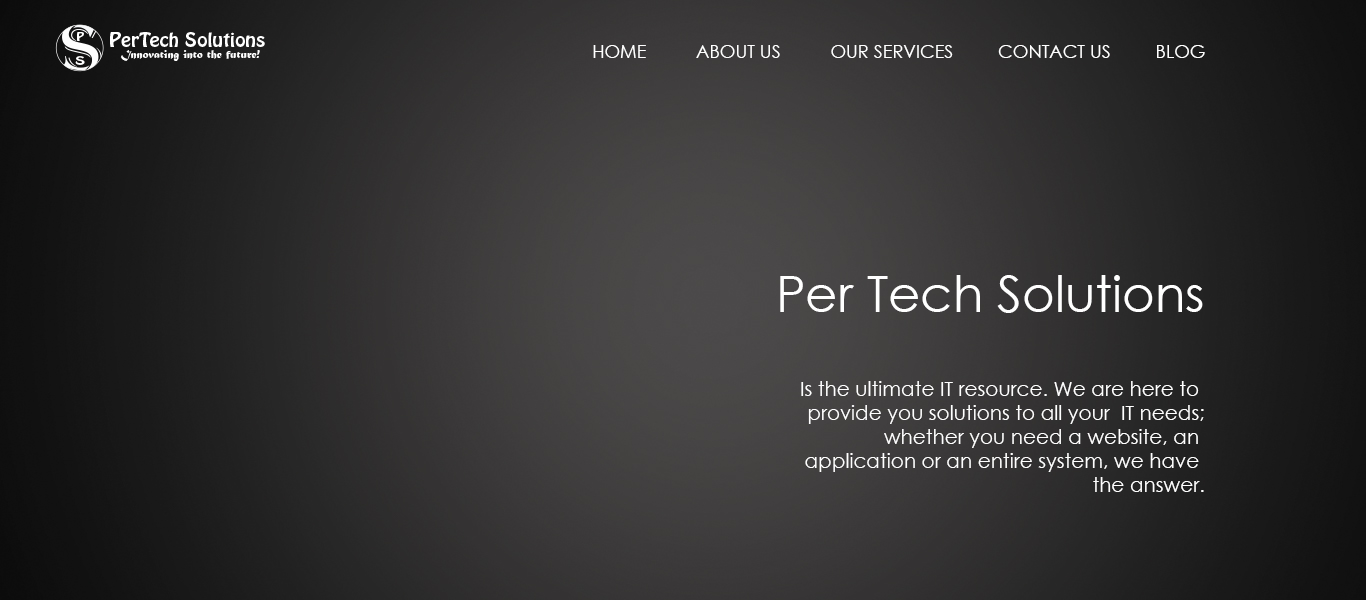
<style>
.page{position:relative;width:1366px;height:600px}
.page>*{position:absolute;margin:0}
.t1{font:18px "CenturyGothic";color:#ffffff}
.t2{font:20px "CenturyGothic";color:#ffffff}
.t3{font:50px "CenturyGothic";color:#ffffff}
</style>
<div class="page">
<p class="t1" style="left:593px;top:45px;width:612px;height:13px">HOME          ABOUT US          OUR SERVICES         CONTACT US         BLOG</p>
<p class="t2" style="left:780px;top:275px;width:424px;height:217px;text-align:right"><span class="t3">Per Tech Solutions<br><br></span>Is the ultimate IT resource. We are here to <br>provide you solutions to all your  IT needs;<br>whether you need a website, an <br>application or an entire system, we have <br>the answer.</p>
</div>
